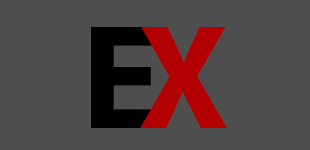
<style>
.page{position:relative;width:310px;height:150px;background:#4e4e4e}
.page>*{position:absolute;margin:0}
.t1{font:149.3px "MyriadPro-Bold";letter-spacing:-0.15em;color:#000000}
.t2{font:149.3px "MyriadPro-Bold";letter-spacing:-0.15em;color:#b20000}
</style>
<div class="page">
<p class="t1" style="left:91px;top:26px;width:136px;height:103px">E<span class="t2">X</span></p>
</div>
